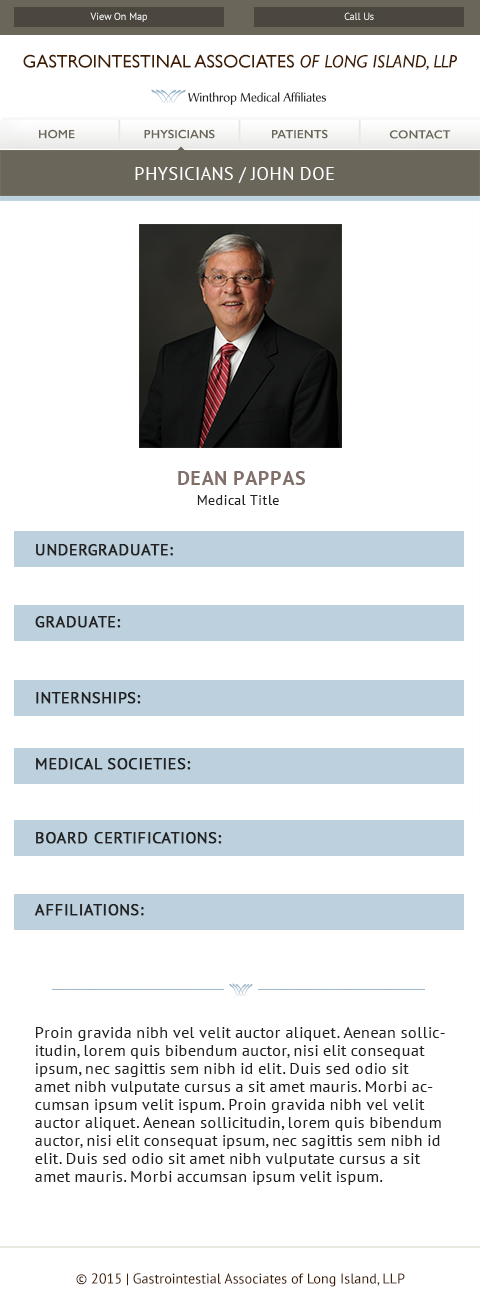
<style>
.page{position:relative;width:480px;height:1305px;background:#ffffff}
.page>*{position:absolute;margin:0}
.t1{font:10.1px "PTSans-Regular";color:#ffffff}
.t2{font:10.1px "PTSans-Regular"}
.t3{font:18.2px "GillSans";color:#401c01}
.t4{font:18.2px "GillSans-Italic";color:#401c01}
.t5{font:12.2px "GillSans-SemiBold";color:#6b665a}
.t6{font:12.1px "GillSans-SemiBold";color:#6b665a}
.t7{font:18.3px "PTSans-Regular";letter-spacing:0.02em;color:#ffffff;text-transform:uppercase}
.t8{font:20.3px "PTSans-Bold";letter-spacing:0.02em;color:#807069;text-transform:uppercase}
.t9{font:14px "PTSans-Regular";letter-spacing:0.02em;color:#222222}
.t10{font:16px/18px "PTSans-Regular";letter-spacing:0.02em;color:#222222;text-transform:uppercase;font-weight:bold}
.t11{font:16px/20px "PTSans-Regular";letter-spacing:0.02em;color:#222222;text-transform:uppercase;font-weight:bold}
.t12{font:16.2px/18px "PTSans-Regular";letter-spacing:0.02em;color:#222222}
.t13{font:14.2px "PTSans-Regular";color:#401c01}
</style>
<div class="page">
<p class="t1" style="left:90px;top:12px;width:57px;height:10px">View On Map</p>
<p class="t2" style="left:344px;top:12px;width:30px;height:8px">Call Us</p>
<p class="t3" style="left:23px;top:54px;width:434px;height:16px">GASTROINTESTINAL ASSOCIATES <span class="t4">OF LONG ISLAND, LLP</span></p>
<p class="t5" style="left:39px;top:129px;width:36px;height:10px">HOME</p>
<p class="t5" style="left:144px;top:129px;width:71px;height:10px">PHYSICIANS</p>
<p class="t5" style="left:272px;top:129px;width:56px;height:10px">PATIENTS</p>
<p class="t6" style="left:389px;top:130px;width:62px;height:9px">CONTACT</p>
<p class="t7" style="left:135px;top:167px;width:199px;height:16px">Physicians / John Doe</p>
<p class="t8" style="left:178px;top:471px;width:127px;height:14px">Dean Pappas</p>
<p class="t9" style="left:197px;top:495px;width:82px;height:10px">Medical Title</p>
<p class="t10" style="left:34px;top:544px;width:188px;height:372px">Undergraduate:<br><br><br><br>Graduate:<br><br><br><br><br><span class="t11">Internships:<br><br><br></span>medical Societies:<br><br><br><br>board certifications:<br><br><br><br>Affiliations:</p>
<p class="t12" style="left:35px;top:1027px;width:410px;height:158px">Proin gravida nibh vel velit auctor aliquet. Aenean sollicitudin, lorem quis bibendum auctor, nisi elit consequat ipsum, nec sagittis sem nibh id elit. Duis sed odio sit amet nibh vulputate cursus a sit amet mauris. Morbi accumsan ipsum velit ispum. Proin gravida nibh vel velit auctor aliquet. Aenean sollicitudin, lorem quis bibendum auctor, nisi elit consequat ipsum, nec sagittis sem nibh id elit. Duis sed odio sit amet nibh vulputate cursus a sit amet mauris. Morbi accumsan ipsum velit ispum.</p>
<p class="t13" style="left:76px;top:1273px;width:329px;height:14px">© 2015 | Gastrointestial Associates of Long Island, LLP</p>
</div>
